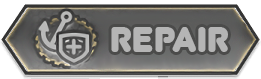
<style>
.page{position:relative;width:261px;height:79px}
.page>*{position:absolute;margin:0}
.t1{font:36px "Junegull";color:#b5b5b5}
</style>
<div class="page">
<p class="t1" style="left:111px;top:27px;width:117px;height:25px">REPAIR</p>
</div>
